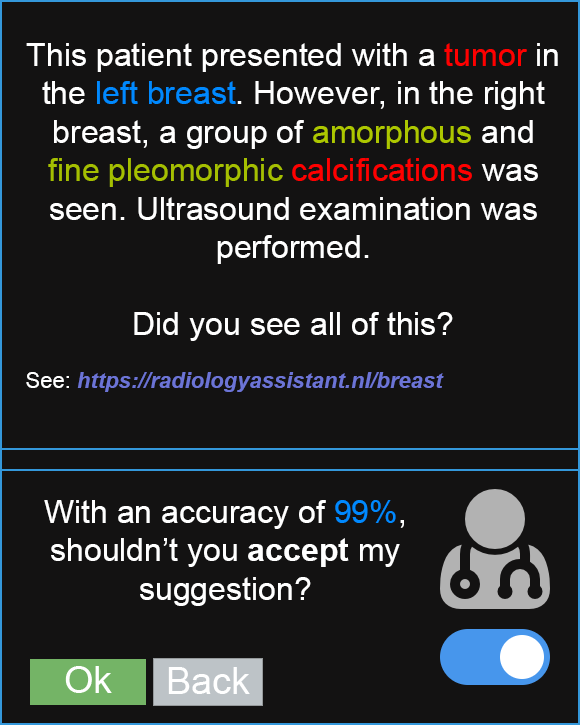
<style>
.page{position:relative;width:580px;height:725px;background:#131212}
.page>*{position:absolute;margin:0}
.t1{font:32px "ArialMT";color:#ffffff}
.t2{font:32px "ArialMT";color:#ff0000}
.t3{font:32px "ArialMT";color:#0089fe}
.t4{font:32px "ArialMT";color:#adc700}
.t5{font:32px "ArialMT";color:#a6bf01}
.t6{font:22px "ArialMT";color:#ffffff}
.t7{font:22px "Arial-BoldItalicMT";color:#6c74d6}
.t8{font:32px "Arial-BoldMT";color:#ffffff}
</style>
<div class="page">
<p class="t1" style="left:26px;top:43px;width:532px;height:349px;text-align:center">This patient presented with a <span class="t2">tumor</span> in the <span class="t3">left breast</span>. However, in the right breast, a group of <span class="t4">amorphous</span> and <span class="t5">fine pleomorphic </span><span class="t2">calcifications</span> was seen. Ultrasound examination was performed.<br><br>Did you see all of this?<br><span class="t6"><br>See: </span><span class="t7">https://radiologyassistant.nl/breast</span></p>
<p class="t1" style="left:44px;top:500px;width:360px;height:106px;text-align:center">With an accuracy of <span class="t3">99%</span>, shouldn’t you <span class="t8">accept</span> my suggestion?</p>
</div>
